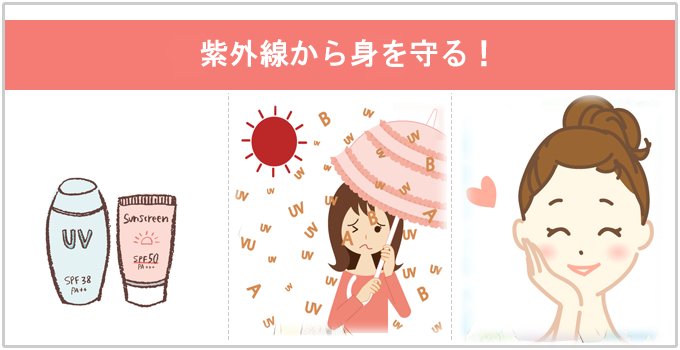
<style>
.page{position:relative;width:680px;height:350px;background:#ffffff}
.page>*{position:absolute;margin:0}
.t1{font:30px "HGGothicE";color:#ffffff}
</style>
<div class="page">
<p class="t1" style="left:200px;top:39px;width:287px;height:29px">紫外線から身を守る！</p>
</div>
